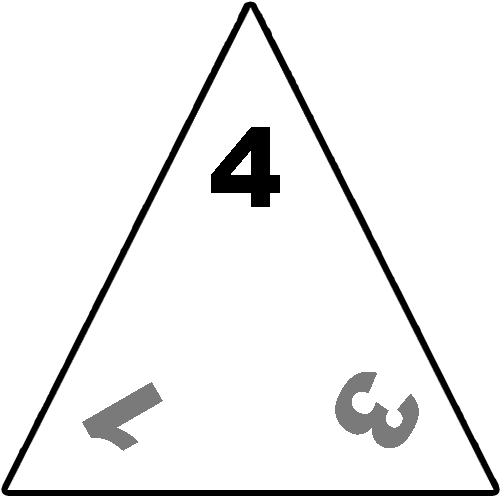
<style>
.page{position:relative;width:500px;height:500px;background:#ffffff}
.page>*{position:absolute;margin:0}
.t1{font:110.8px "Arial-Black";color:#000000}
.t2{font:110.8px "Arial-Black";color:#7a7a7a}
</style>
<div class="page">
<p class="t1" style="left:211px;top:127px;width:69px;height:80px">4</p>
<p class="t2" style="left:335px;top:372px;width:84px;height:76px;rotate:120deg">3</p>
<p class="t2" style="left:82px;top:382px;width:81px;height:69px;rotate:-120deg">1</p>
</div>
